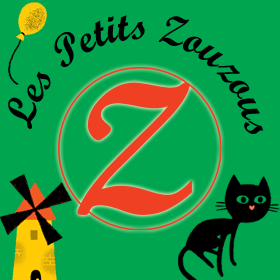
<style>
.page{position:relative;width:280px;height:280px;background:#00a550}
.page>*{position:absolute;margin:0}
.t1{font:42px "ScriptMTBold";color:#000000}
</style>
<div class="page">
<p class="t1" style="left:8px;top:15px;width:255px;height:119px">Les Petits Zouzous</p>
</div>
